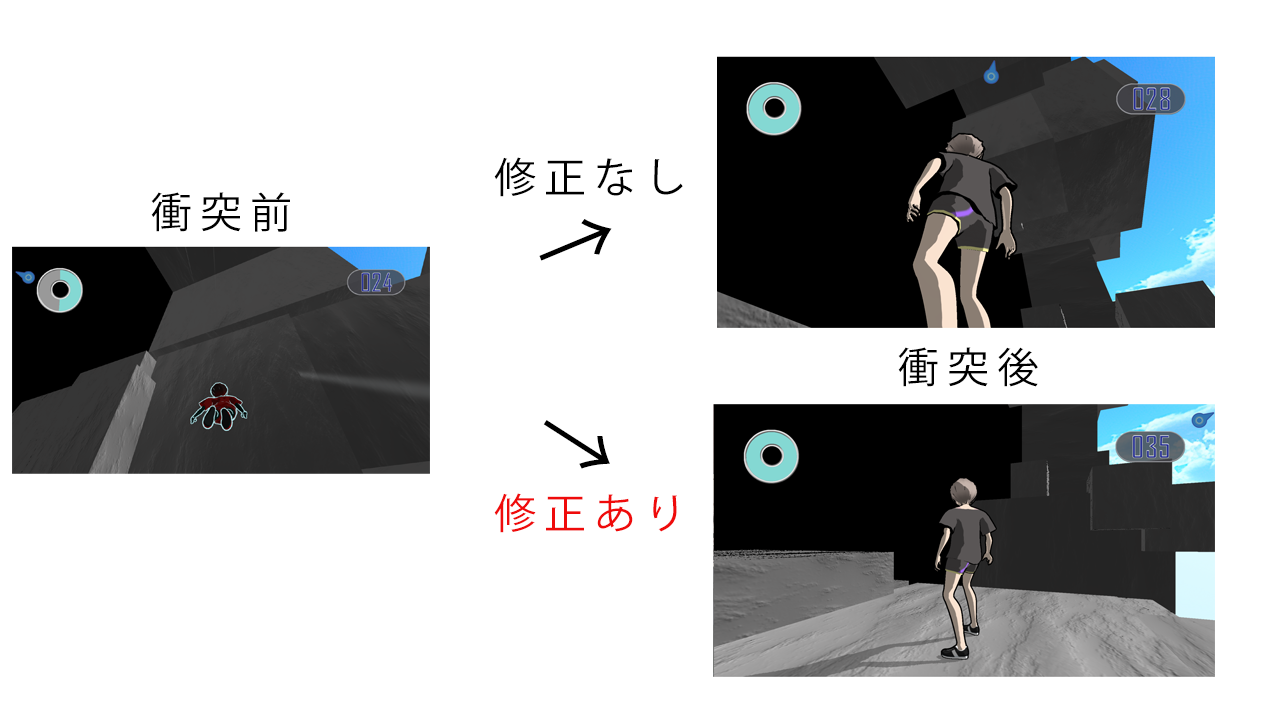
<style>
.page{position:relative;width:1280px;height:720px;background:#ffffff}
.page>*{position:absolute;margin:0}
.t1{font:41.7px "KozGoPr6N-Regular";letter-spacing:0.2em;color:#000000}
.t2{font:83.3px "KozGoPr6N-Regular";letter-spacing:0.2em;color:#000000}
.t3{font:41.7px "KozGoPr6N-Regular";letter-spacing:0.2em;color:#ef0b0b}
</style>
<div class="page">
<p class="t1" style="left:494px;top:157px;width:189px;height:40px">修正なし</p>
<p class="t1" style="left:151px;top:192px;width:139px;height:40px">衝突前</p>
<p class="t2" style="left:539px;top:219px;width:73px;height:42px;rotate:-23deg">→</p>
<p class="t1" style="left:898px;top:347px;width:140px;height:40px">衝突後</p>
<p class="t2" style="left:543px;top:420px;width:67px;height:49px;rotate:33deg">→</p>
<p class="t3" style="left:494px;top:493px;width:183px;height:40px">修正あり</p>
</div>
